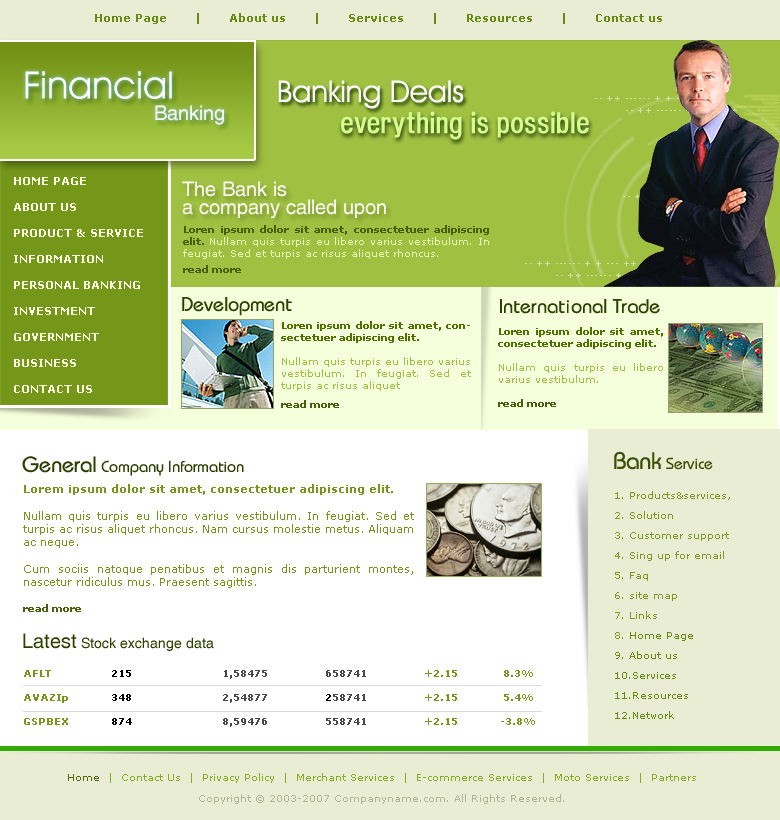
<style>
.page{position:relative;width:780px;height:820px;background:#ffffff}
.page>*{position:absolute;margin:0}
.t1{font:11px "Verdana-Bold";color:#698a12}
.t2{font:38px "AvantGardeITCbyBT-Book";color:#ffffff}
.t3{font:30px "AvantGardeITCbyBT-Book";color:#ffffff}
.t4{font:20px "Helios";color:#ffffff}
.t5{font:29px "HeadacheNormal";color:#d4ff8f}
.t6{font:11px/13px "Verdana-Bold";color:#faffe2}
.t7{font:20px/18px "Helios";color:#ffffff}
.t8{font:20px "Bauhaus";color:#2d3e00}
.t9{font:10px "Verdana";color:#a0c041}
.t10{font:10px "Verdana-Bold";color:#507000}
.t11{font:10px "Verdana-Bold";color:#475e0d}
.t12{font:16px "Bauhaus";color:#2d3e00}
.t13{font:22px "Bauhaus";color:#2d3e00}
.t14{font:16px "Bauhaus";color:#3b4f05}
.t15{font:24px "Bauhaus";color:#3b4f05}
.t16{font:11px "Verdana";color:#749719}
.t17{font:11px "Verdana-Bold";color:#749719}
.t18{font:10px/20px "Verdana";color:#7c9827}
.t19{font:10px/20px "Verdana";color:#698a12}
.t20{font:14px "Helios";color:#2d3e00}
.t21{font:20px "Helios";color:#2d3e00}
.t22{font:10px "Verdana-Bold";color:#749719}
.t23{font:10px "Verdana-Bold";color:#000000}
.t24{font:10px "Verdana-Bold";color:#494949}
.t25{font:10px/21px "Verdana";color:#87ae22}
.t26{font:10px/21px "Verdana";color:#516b0c}
.t27{font:10px/21px "Verdana";color:#afb592}
</style>
<div class="page">
<p class="t1" style="left:95px;top:13px;width:567px;height:11px">Home Page       |       About us       |       Services       |       Resources       |       Contact us</p>
<p class="t2" style="left:25px;top:71px;width:147px;height:28px">Financial</p>
<p class="t3" style="left:278px;top:80px;width:186px;height:29px">Banking Deals</p>
<p class="t4" style="left:155px;top:105px;width:69px;height:20px">Banking</p>
<p class="t5" style="left:341px;top:111px;width:248px;height:29px">everything is possible</p>
<p class="t6" style="left:14px;top:177px;width:129px;height:216px;text-align:justify">HOME PAGE<br><br>ABOUT US<br><br>PRODUCT &amp; SERVICE<br><br>INFORMATION<br><br>PERSONAL BANKING<br><br>INVESTMENT<br><br>GOVERNMENT<br><br>BUSINESS<br><br>CONTACT US</p>
<p class="t7" style="left:182px;top:181px;width:204px;height:38px">The Bank is<br>a company called upon</p>
<p class="t8" style="left:182px;top:297px;width:110px;height:19px">Development</p>
<p class="t8" style="left:500px;top:299px;width:160px;height:15px">International Trade</p>
<p class="t9" style="left:281px;top:321px;width:190px;height:70px;text-align:justify"><span class="t10">Loren ipsum dolor sit amet, consectetuer adipiscing elit.<br><br></span>Nullam quis turpis eu libero varius vestibulum. In feugiat. Sed et turpis ac risus aliquet</p>
<p class="t10" style="left:498px;top:327px;width:165px;height:56px;text-align:justify">Loren ipsum dolor sit amet, consectetuer adipiscing elit.<br><br><span class="t9">Nullam quis turpis eu libero varius vestibulum.</span></p>
<p class="t11" style="left:281px;top:400px;width:58px;height:8px">read more</p>
<p class="t11" style="left:498px;top:399px;width:58px;height:8px">read more</p>
<p class="t12" style="left:22px;top:456px;width:222px;height:20px"><span class="t13">General</span> Company Information</p>
<p class="t14" style="left:614px;top:451px;width:99px;height:19px"><span class="t15">Bank</span> Service</p>
<p class="t16" style="left:23px;top:484px;width:391px;height:128px;text-align:justify"><span class="t17">Lorem ipsum dolor sit amet, consectetuer adipiscing elit.</span> <br><br>Nullam quis turpis eu libero varius vestibulum. In feugiat. Sed et turpis ac risus aliquet rhoncus. Nam cursus molestie metus. Aliquam ac neque.<br><br>Cum sociis natoque penatibus et magnis dis parturient montes, nascetur ridiculus mus. Praesent sagittis.<br><br><span class="t11">read more</span></p>
<p class="t18" style="left:615px;top:491px;width:115px;height:228px">1. Products&amp;services,<br>2. Solution<br>3. Customer support<br>4. Sing up for email<br>5. Faq<br>6. site map<br>7. Links<br>8. <span class="t19">Home Page <br>9. About us<br>10.Services<br>11.Resources<br>12.Network</span></p>
<p class="t20" style="left:23px;top:633px;width:191px;height:18px"><span class="t21">Latest </span>Stock exchange data</p>
<p class="t22" style="left:24px;top:670px;width:511px;height:57px">AFLT<span class="t23">                    215                            </span><span class="t24">  1,58475                   658741                   </span>+2.15               8.3%<br><br>AVAZIp<span class="t23">              348                           </span><span class="t24">   2,54877</span><span class="t23">                   2</span><span class="t24">58741                   </span>+2.15               5.4%         <br><br>GSPBEX<span class="t23">              874                            </span><span class="t24">  8,59476                   558741                   </span>+2.15              -3.8%</p>
<p class="t25" style="left:68px;top:773px;width:628px;height:31px;text-align:center"><span class="t26">Home  </span>|  Contact Us  |  Privacy Policy  |  Merchant Services  |  E-commerce Services  |  Moto Services  |  Partners<br><span class="t27">Copyright © 2003-2007 Companyname.com. All Rights Reserved.</span></p>
</div>
